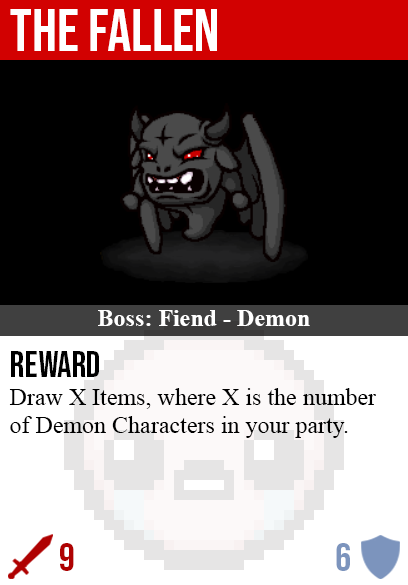
<style>
.page{position:relative;width:408px;height:585px;background:#000000}
.page>*{position:absolute;margin:0}
.t1{font:60px "BebasNeue-Regular";color:#ffffff}
.t2{font:24px "TimesNewRomanPS-BoldMT";color:#ffffff}
.t3{font:36px "BebasNeue-Regular";color:#000000}
.t4{font:24px "TimesNewRomanPSMT";color:#000000}
.t5{font:40px "BebasNeue-Regular";color:#af0202}
.t6{font:40px "BebasNeue-Regular";color:#7c94bd}
</style>
<div class="page">
<p class="t1" style="left:10px;top:9px;width:207px;height:42px">the fallen</p>
<p class="t2" style="left:98px;top:310px;width:212px;height:16px">Boss: Fiend - Demon</p>
<p class="t3" style="left:11px;top:351px;width:88px;height:26px">reward</p>
<p class="t4" style="left:9px;top:388px;width:367px;height:50px">Draw X Items, where X is the number<br>of Demon Characters in your party.</p>
<p class="t5" style="left:60px;top:543px;width:14px;height:28px">9</p>
<p class="t6" style="left:336px;top:543px;width:14px;height:28px">6</p>
</div>
